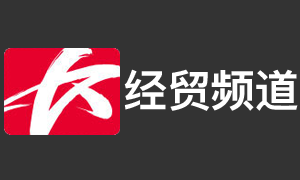
<style>
.page{position:relative;width:300px;height:180px;background:#333333}
.page>*{position:absolute;margin:0}
.t1{font:44px "PingFang-SC-Heavy";letter-spacing:-0.025em;color:#ffffff}
</style>
<div class="page">
<p class="t1" style="left:124px;top:69px;width:174px;height:42px">经贸频道</p>
</div>
